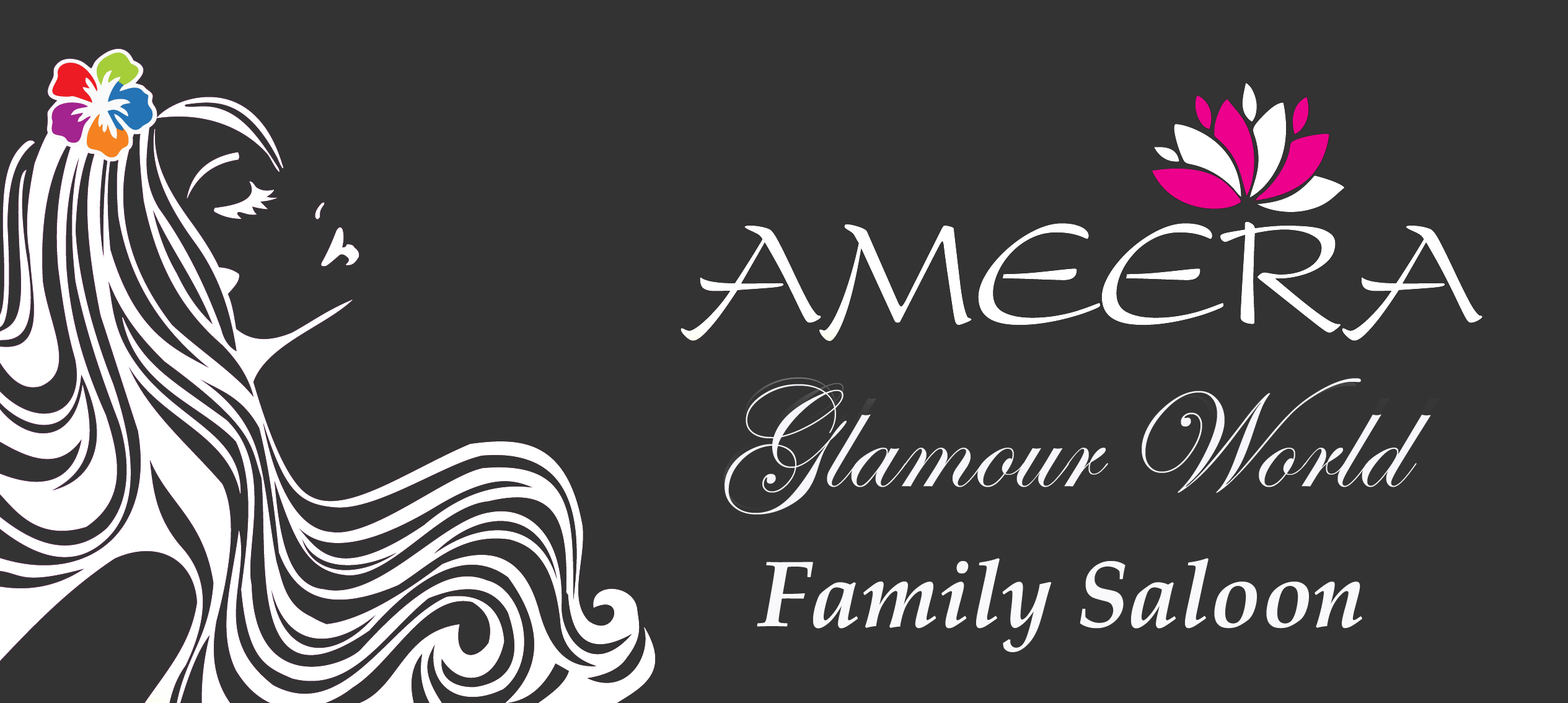
<style>
.page{position:relative;width:1568px;height:703px;background:#333333}
.page>*{position:absolute;margin:0}
.t1{font:142px "EdwardianScriptITC";color:#f6f6fb}
.t2{font:93px "PalatinoLinotype-BoldItalic";color:#f9f9fc}
</style>
<div class="page">
<p class="t1" style="left:725px;top:378px;width:706px;height:136px">Glamour World</p>
<p class="t2" style="left:757px;top:558px;width:605px;height:94px">Family Saloon</p>
</div>
